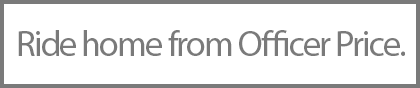
<style>
.page{position:relative;width:420px;height:88px;background:#ffffff}
.page>*{position:absolute;margin:0}
.t1{font:36px "MyriadPro-Regular";letter-spacing:-0.05em;color:#7a7a7a}
</style>
<div class="page">
<p class="t1" style="left:18px;top:30px;width:387px;height:26px">Ride home from Officer Price.</p>
</div>
